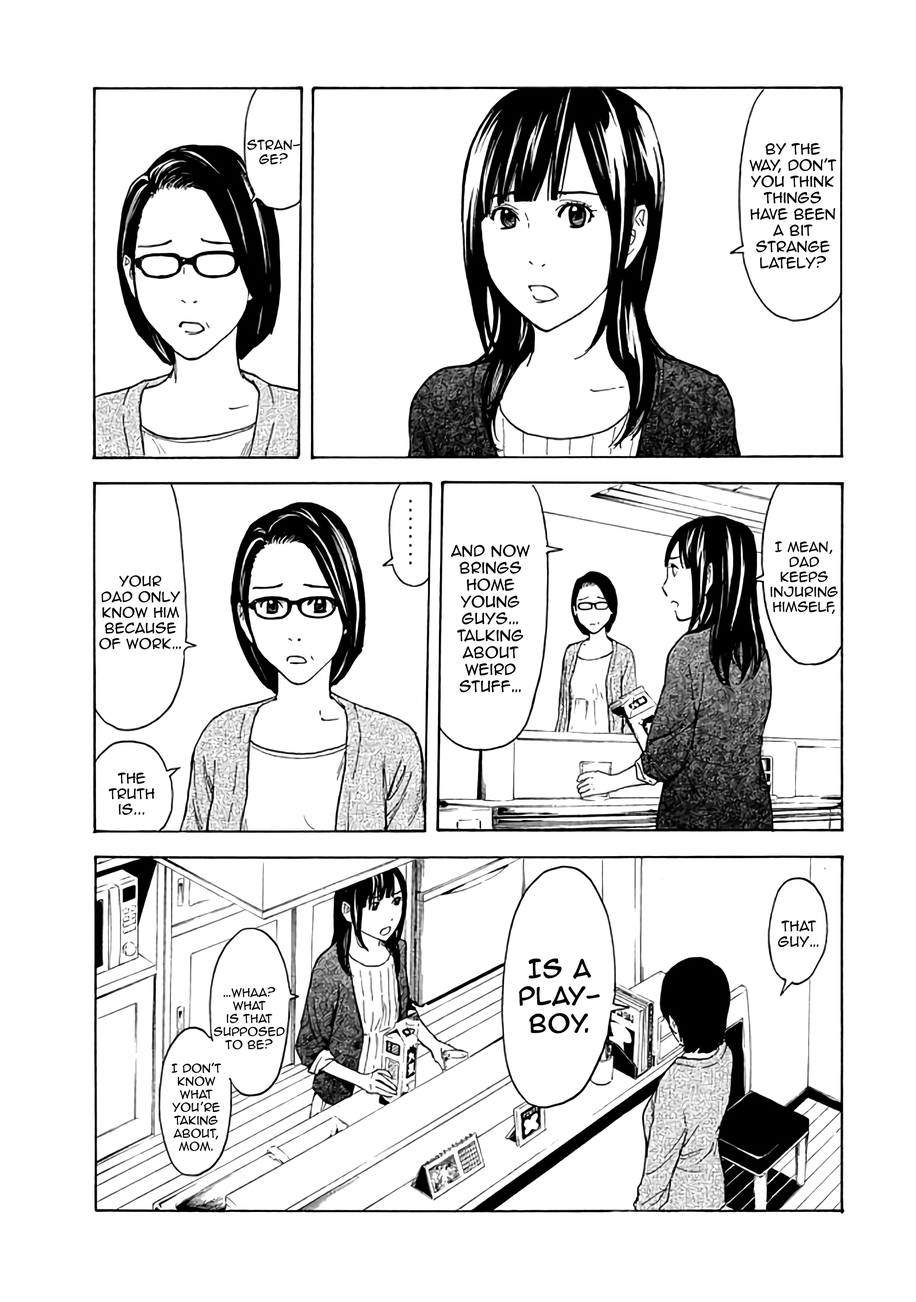
<style>
.page{position:relative;width:916px;height:1302px;background:#ffffff}
.page>*{position:absolute;margin:0}
.t1{font:11.9px "AnimeAce2.0BB";color:#000000}
.t2{font:13.6px "AnimeAce2.0BB";color:#000000}
.t3{font:14.1px "AnimeAce2.0BB";color:#000000}
.t4{font:12.5px "AnimeAce2.0BB";color:#000000}
.t5{font:13px "AnimeAce2.0BB";color:#000000}
.t6{font:22.8px "AnimeAce2.0BB";color:#000000;font-weight:bold}
.t7{font:10.9px "AnimeAce2.0BB";color:#000000}
</style>
<div class="page">
<p class="t1" style="left:247px;top:139px;width:53px;height:25px;text-align:center">Stran-<br>ge?</p>
<p class="t2" style="left:749px;top:143px;width:87px;height:126px;text-align:center">By the <br>way, don't you think things <br>have been a bit strange <br>lately?</p>
<p class="t3" style="left:451px;top:544px;width:79px;height:148px;text-align:center">and now<br>brings<br>home<br>young <br>guys… <br>talking <br>about <br>weird <br>stuff…</p>
<p class="t4" style="left:770px;top:541px;width:68px;height:73px;text-align:center">I mean, <br>dad <br>keeps<br>injuring<br>himself,</p>
<p class="t5" style="left:99px;top:575px;width:82px;height:75px;text-align:center">Your <br>dad only <br>know him <br>because of work…</p>
<p class="t5" style="left:109px;top:773px;width:46px;height:42px;text-align:center">the <br>truth <br>is...</p>
<p class="t5" style="left:778px;top:920px;width:41px;height:27px;text-align:center">That <br>guy…</p>
<p class="t6" style="left:519px;top:958px;width:80px;height:76px;text-align:center">Is a <br>play-<br>boy.</p>
<p class="t7" style="left:214px;top:987px;width:71px;height:63px;text-align:center">…Whaa? What <br>is that <br>supposed <br>to be?</p>
<p class="t7" style="left:171px;top:1062px;width:50px;height:89px;text-align:center">I don't <br>know what <br>you’re <br>taking <br>about, <br>mom.</p>
</div>
